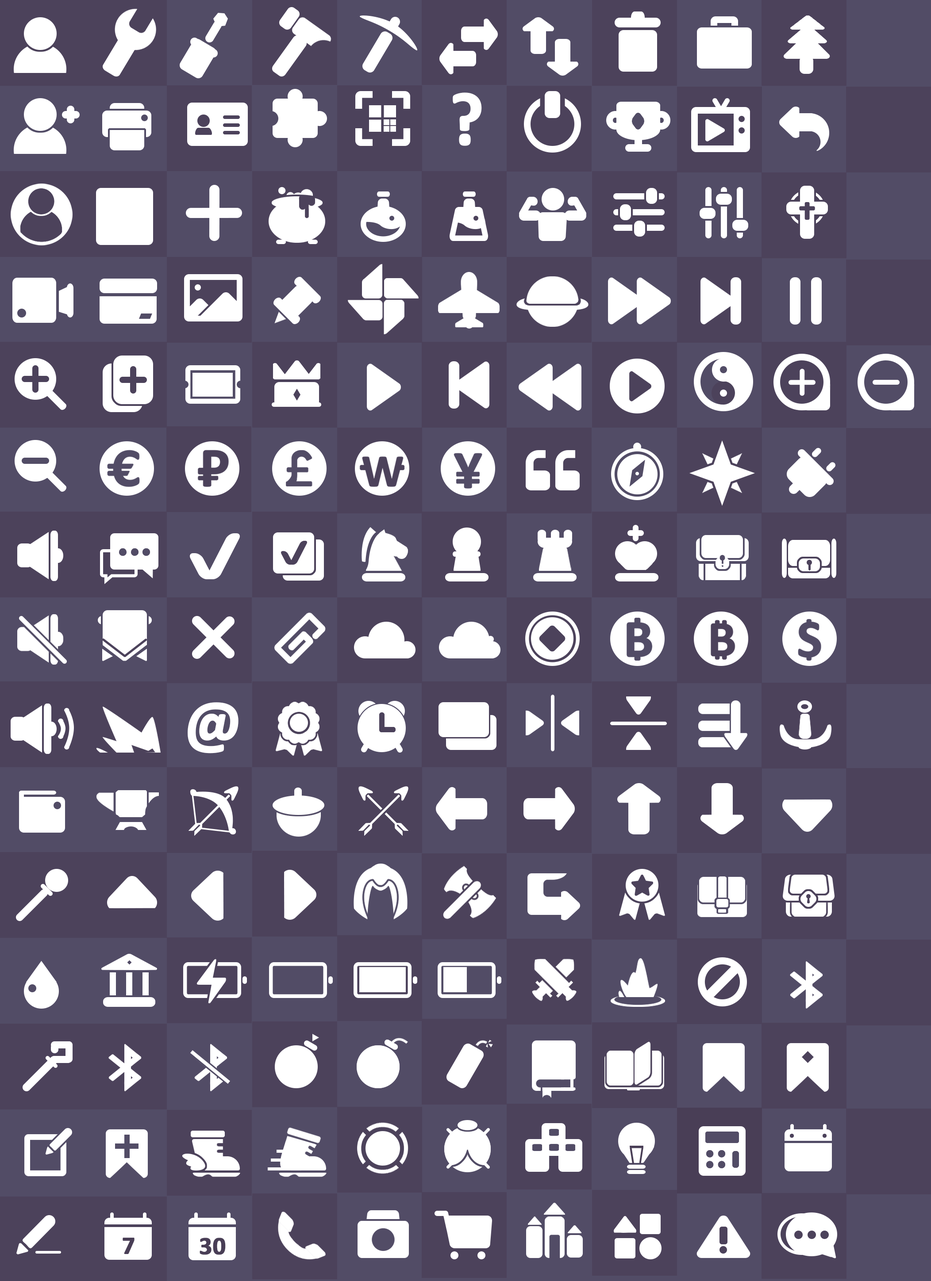
<style>
.page{position:relative;width:931px;height:1281px;background:#524c66}
.page>*{position:absolute;margin:0}
.t1{font:75.9px "Calibri-Bold";letter-spacing:0.08em;color:#ffffff;font-weight:bold}
.t2{font:63.8px "Calibri-Bold";letter-spacing:0.08em;color:#ffffff;font-weight:bold}
.t3{font:25.2px "Calibri-Bold";letter-spacing:0.08em;color:#493e56;font-weight:bold}
.t4{font:25.2px "Calibri-Bold";letter-spacing:0.01em;color:#493e56;font-weight:bold}
</style>
<div class="page">
<p class="t1" style="left:452px;top:92px;width:30px;height:54px">?</p>
<p class="t2" style="left:188px;top:702px;width:50px;height:52px">@</p>
<p class="t3" style="left:123px;top:1238px;width:11px;height:16px">7</p>
<p class="t4" style="left:199px;top:1238px;width:27px;height:17px">30</p>
</div>
